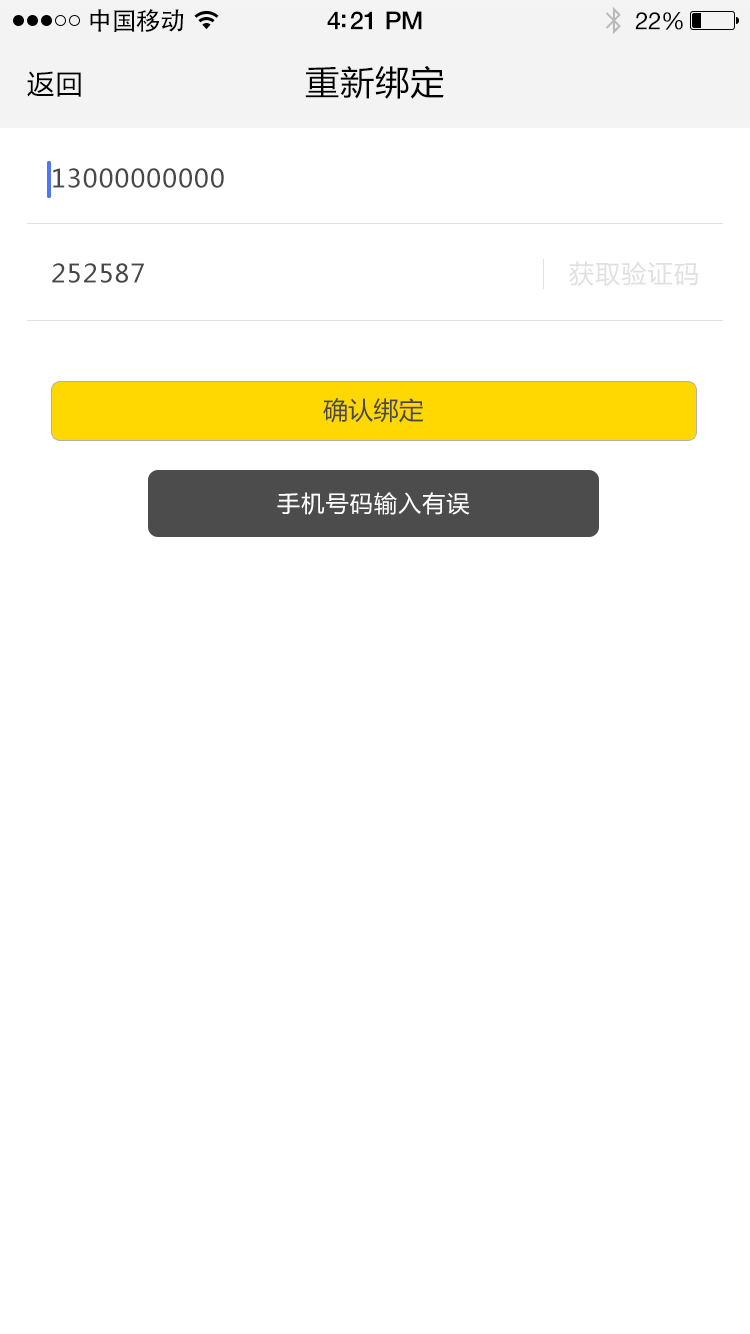
<style>
.page{position:relative;width:750px;height:1334px;background:#ffffff}
.page>*{position:absolute;margin:0}
.t1{font:25px "AdobeHeitiStd-Regular";letter-spacing:-0.025em;color:#000000}
.t2{font:25px "HelveticaNeue-Medium";letter-spacing:-0.02em;color:#000000}
.t3{font:24px "HelveticaNeue";letter-spacing:-0.02em;color:#000000}
.t4{font:34px "MicrosoftYaHei";letter-spacing:0.03em;color:#000000}
.t5{font:27px "MicrosoftYaHei";letter-spacing:0.05em;color:#000000}
.t6{font:25px "MicrosoftYaHei";letter-spacing:0.05em;color:#484848}
.t7{font:25px "MicrosoftYaHei";letter-spacing:0.05em;color:#e0e0e0}
.t8{font:25px "MicrosoftYaHei";letter-spacing:0.01em;color:#555555}
.t9{font:23px "MicrosoftYaHei";letter-spacing:0.05em;color:#ffffff}
</style>
<div class="page">
<p class="t1" style="left:90px;top:9px;width:94px;height:23px">中国移动</p>
<p class="t2" style="left:327px;top:11px;width:95px;height:19px">4:21 PM</p>
<p class="t3" style="left:635px;top:12px;width:48px;height:18px">22%</p>
<p class="t4" style="left:305px;top:65px;width:139px;height:34px">重新绑定</p>
<p class="t5" style="left:27px;top:71px;width:54px;height:26px">返回</p>
<p class="t6" style="left:53px;top:168px;width:171px;height:20px">13000000000</p>
<p class="t6" style="left:52px;top:263px;width:92px;height:20px">252587</p>
<p class="t7" style="left:569px;top:261px;width:129px;height:25px">获取验证码</p>
<p class="t8" style="left:323px;top:398px;width:101px;height:25px">确认绑定</p>
<p class="t9" style="left:277px;top:492px;width:193px;height:23px">手机号码输入有误</p>
</div>
